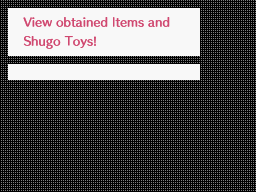
<style>
.page{position:relative;width:256px;height:192px;background:#000000}
.page>*{position:absolute;margin:0}
.t1{font:10.7px/18.7px "HummingStd-D";letter-spacing:0.02em;color:#d04870}
.t2{font:11.2px/18.7px "HummingStd-D";letter-spacing:0.02em;color:#d04870;scale:0.95 1}
</style>
<div class="page">
<p class="t1" style="left:23px;top:17px;width:147px;height:32px">View obtained <span class="t2">I</span>tems and<br>Shugo <span class="t2">T</span>oys!</p>
</div>
